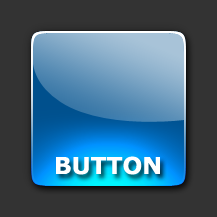
<style>
.page{position:relative;width:217px;height:217px;background:#333333}
.page>*{position:absolute;margin:0}
.t1{font:23.3px "Verdana-Bold";color:#ffffff;text-transform:uppercase}
</style>
<div class="page">
<p class="t1" style="left:56px;top:156px;width:104px;height:19px">Button</p>
</div>
